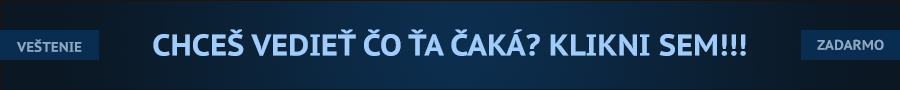
<style>
.page{position:relative;width:900px;height:90px}
.page>*{position:absolute;margin:0}
.t1{font:30px "PTSans-CaptionBold";color:#9fccfa}
.t2{font:30px "PTSans-CaptionBold";color:#9fccfa;text-decoration:underline}
.t3{font:14px "PTSans-CaptionBold";color:#8da8c3}
</style>
<div class="page">
<p class="t1" style="left:153px;top:29px;width:593px;height:27px">CHCEŠ VEDIEŤ ČO ŤA ČAKÁ? <span class="t2">KLIKNI SEM!!!</span></p>
<p class="t3" style="left:16px;top:39px;width:66px;height:13px">VEŠTENIE</p>
<p class="t3" style="left:817px;top:39px;width:67px;height:11px">ZADARMO</p>
</div>
